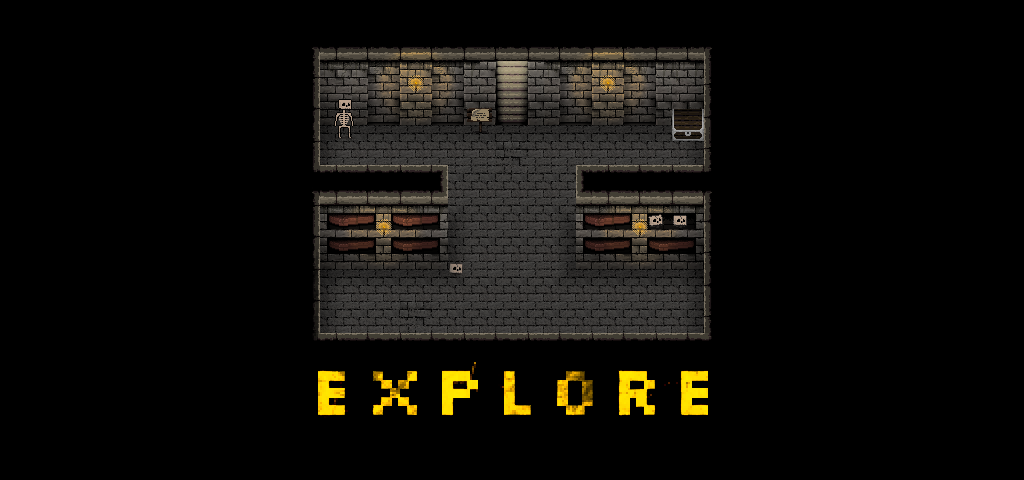
<style>
.page{position:relative;width:1024px;height:480px;background:#000000}
.page>*{position:absolute;margin:0}
.t1{font:72px "Silkscreen-Expanded";color:#ffd800;font-weight:bold}
</style>
<div class="page">
<p class="t1" style="left:318px;top:371px;width:390px;height:44px">EXPLORE</p>
</div>
